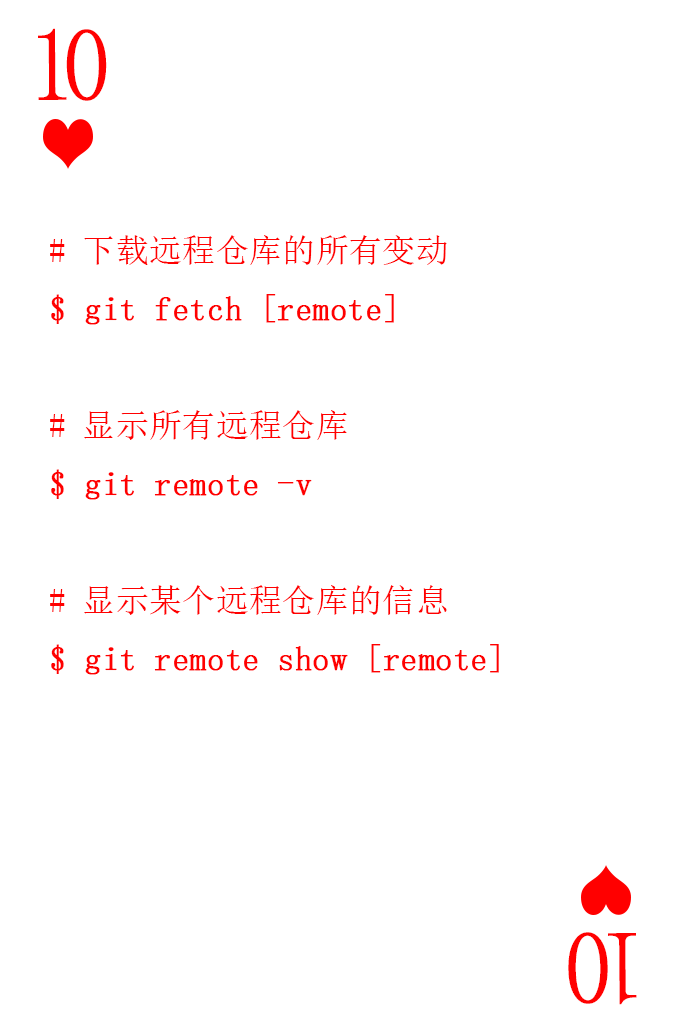
<style>
.page{position:relative;width:673px;height:1028px;background:#ffffff}
.page>*{position:absolute;margin:0}
.t1{font:104.2px "SimSun-ExtB";letter-spacing:-0.14em;color:#ff0101;scale:0.93 1}
.t2{font:33.3px "SimSun";color:#ff0000;font-weight:bold}
.t3{font:33.3px "SimSun";color:#ff0000}
</style>
<div class="page">
<p class="t1" style="left:38px;top:28px;width:69px;height:73px">10</p>
<p class="t2" style="left:50px;top:235px;width:449px;height:440px"><span class="t3"># 下载远程仓库的所有变动<br></span>$ git fetch [remote]<br><span class="t3"><br># 显示所有远程仓库<br></span>$ git remote -v<br><span class="t3"><br># 显示某个远程仓库的信息<br></span>$ git remote show [remote]</p>
<p class="t1" style="left:568px;top:932px;width:69px;height:73px;rotate:180deg">10</p>
</div>
